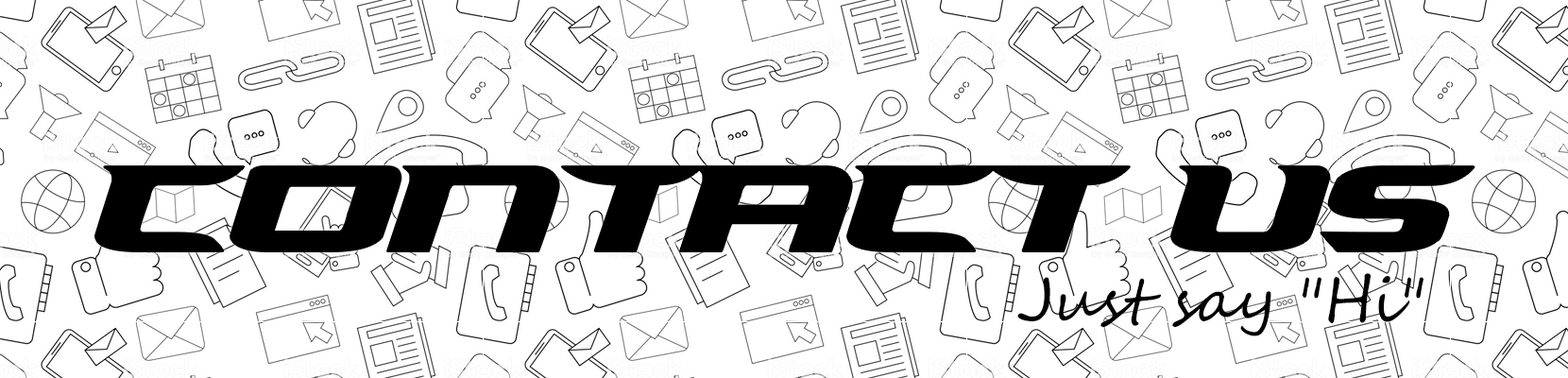
<style>
.page{position:relative;width:1568px;height:378px;background:#ffffff}
.page>*{position:absolute;margin:0}
.t1{font:236.1px "NHLDucks";color:#000000}
.t2{font:60.3px "SegoeScript";color:#000000}
</style>
<div class="page">
<p class="t1" style="left:95px;top:166px;width:1379px;height:85px">Contact us</p>
<p class="t2" style="left:1017px;top:273px;width:406px;height:63px">Just say "Hi"</p>
</div>
